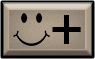
<style>
.page{position:relative;width:95px;height:59px}
.page>*{position:absolute;margin:0}
.t1{font:60px "ArialMT";color:#000000}
</style>
<div class="page">
<p class="t1" style="left:52px;top:15px;width:29px;height:29px">+</p>
</div>
